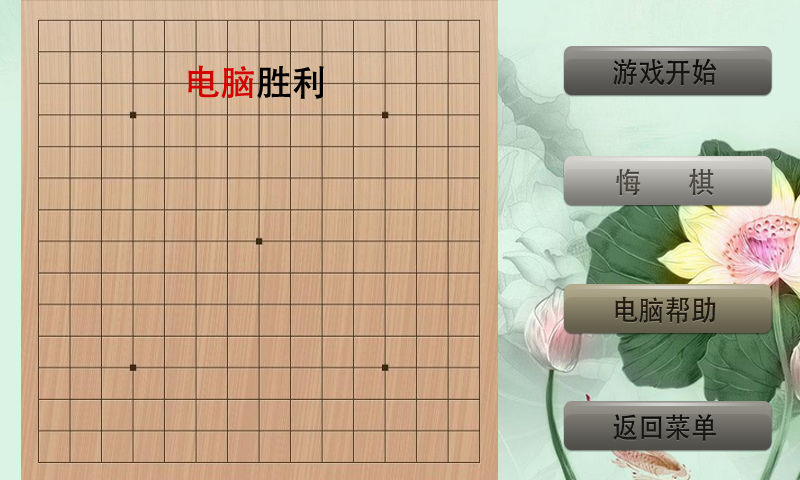
<style>
.page{position:relative;width:800px;height:480px}
.page>*{position:absolute;margin:0}
.t1{font:36px "AdobeHeitiStd-Regular";color:#d50000}
.t2{font:36px "AdobeHeitiStd-Regular";color:#000000}
.t3{font:28.7px "AdobeHeitiStd-Regular";color:#000000;scale:0.92 1}
.t4{font:28.7px "AdobeHeitiStd-Regular";color:#4a4840;scale:0.92 1}
.t5{font:28.7px "AdobeHeitiStd-Regular";color:#1e1a12;scale:0.92 1}
</style>
<div class="page">
<p class="t1" style="left:188px;top:65px;width:136px;height:34px">电脑<span class="t2">胜利</span></p>
<p class="t3" style="left:613px;top:58px;width:104px;height:28px">游戏开始</p>
<p class="t4" style="left:616px;top:168px;width:98px;height:28px">悔        棋</p>
<p class="t5" style="left:615px;top:296px;width:101px;height:28px">电脑帮助</p>
<p class="t3" style="left:613px;top:414px;width:103px;height:27px">返回菜单</p>
</div>
